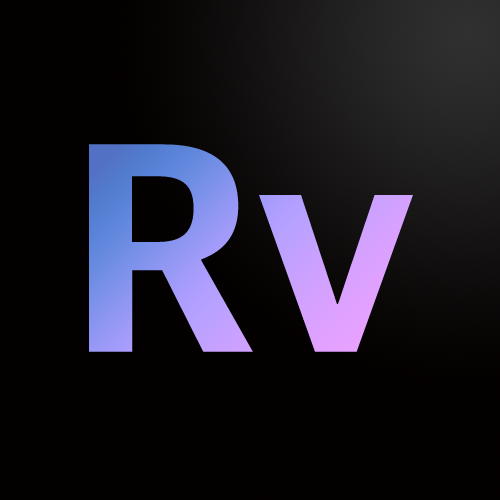
<style>
.page{position:relative;width:500px;height:500px;background:#030000}
.page>*{position:absolute;margin:0}
.t1{font:301.9px "AppleSDGothicNeo-ExtraBold"}
</style>
<div class="page">
<p class="t1" style="left:89px;top:144px;width:324px;height:208px">Rv</p>
</div>
